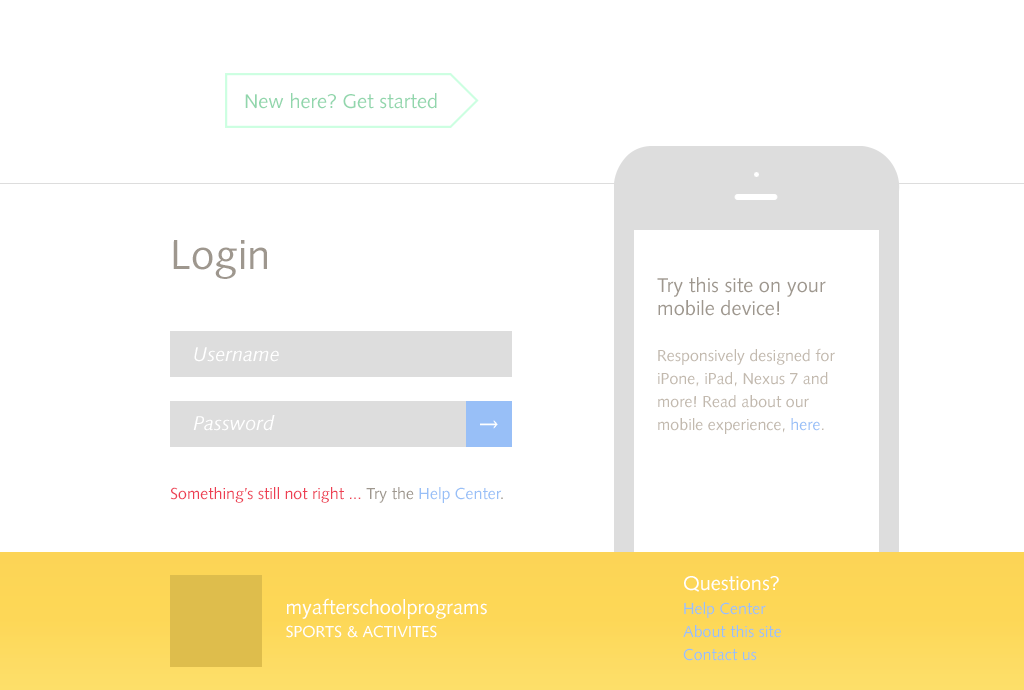
<style>
.page{position:relative;width:1024px;height:690px;background:#ffffff}
.page>*{position:absolute;margin:0}
.t1{font:20px "SyntaxLTStd-Roman";color:#91d6ac}
.t2{font:42px "SyntaxLTStd-Roman";color:#9e978e}
.t3{font:20px/23px "SyntaxLTStd-Roman";color:#9e978e}
.t4{font:20px "SyntaxLTStd-Italic";color:#ffffff}
.t5{font:16px/23px "SyntaxLTStd-Roman";color:#c2b9ae}
.t6{font:16px/23px "SyntaxLTStd-Roman";color:#98bff7}
.t7{font:16px "SyntaxLTStd-Roman";color:#ed3e52}
.t8{font:16px "SyntaxLTStd-Roman";color:#9e978e}
.t9{font:16px "SyntaxLTStd-Roman";color:#98bff7}
.t10{font:20px "SyntaxLTStd-Roman";color:#ffffff}
.t11{font:20px/23px "SyntaxLTStd-Roman";color:#ffffff}
.t12{font:16px/23px "SyntaxLTStd-Roman";color:#ffffff}
</style>
<div class="page">
<p class="t1" style="left:245px;top:93px;width:192px;height:16px">New here? Get started</p>
<p class="t2" style="left:173px;top:240px;width:94px;height:39px">Login</p>
<p class="t3" style="left:657px;top:277px;width:169px;height:39px">Try this site on your<br>mobile device!</p>
<p class="t4" style="left:194px;top:347px;width:85px;height:15px">Username</p>
<p class="t5" style="left:658px;top:348px;width:177px;height:86px">Responsively designed for iPone, iPad, Nexus 7 and more! Read about our mobile experience, <span class="t6">here</span>.</p>
<p class="t4" style="left:193px;top:415px;width:82px;height:16px">Password</p>
<p class="t7" style="left:170px;top:487px;width:333px;height:16px">Something’s still not right ... <span class="t8">Try the </span><span class="t9">Help Center</span><span class="t8">.</span></p>
<p class="t10" style="left:684px;top:576px;width:95px;height:16px">Questions?</p>
<p class="t11" style="left:286px;top:598px;width:201px;height:40px">myafterschoolprograms<br><span class="t12">SPORTS &amp; ACTIVITES</span></p>
<p class="t6" style="left:683px;top:602px;width:98px;height:59px">Help Center<br>About this site<br>Contact us</p>
</div>
